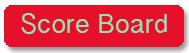
<style>
.page{position:relative;width:189px;height:53px;background:#e7102a}
.page>*{position:absolute;margin:0}
.t1{font:24px "BanglaSangamMN";color:#8ce6ba}
</style>
<div class="page">
<p class="t1" style="left:21px;top:13px;width:146px;height:21px">Score Board</p>
</div>
